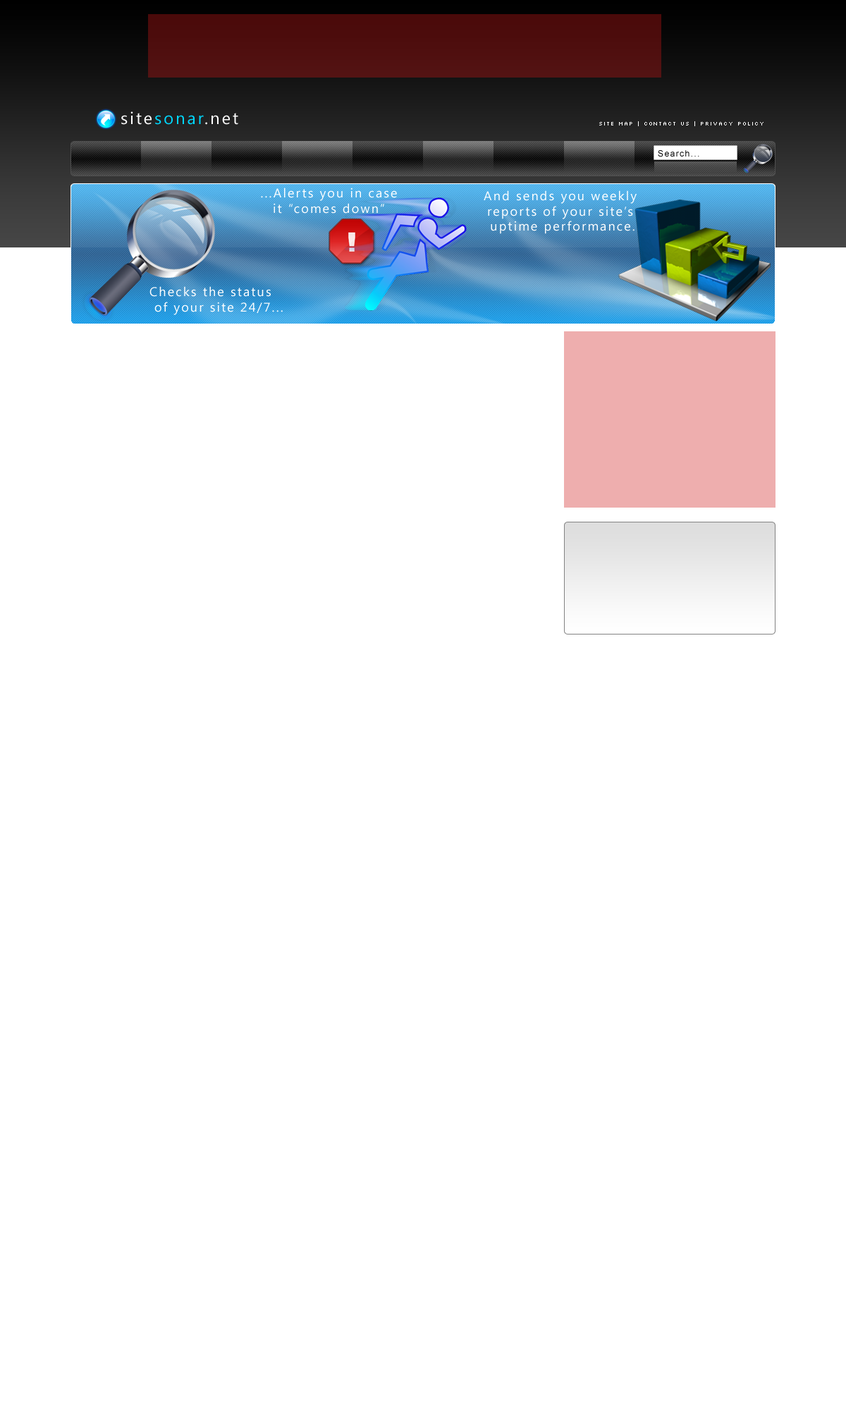
<style>
.page{position:relative;width:846px;height:1410px;background:#ffffff}
.page>*{position:absolute;margin:0}
.t1{font:16.9px "SegoeUI";letter-spacing:0.12em;color:#00d8ff}
.t2{font:16.9px "SegoeUI";letter-spacing:0.12em;color:#ffffff}
.t3{font:5.6px "Silkscreen";letter-spacing:0.12em;color:#ffffff}
.t4{font:8.5px "ArialMT";letter-spacing:0.12em;color:#000000}
.t5{font:12.7px "SegoeUI";letter-spacing:0.12em;color:#ffffff}
</style>
<div class="page">
<p class="t1" style="left:121px;top:111px;width:117px;height:14px"><span class="t2">site</span>sonar<span class="t2">.net</span></p>
<p class="t3" style="left:599px;top:121px;width:164px;height:5px">Site Map | Contact Us | Privacy Policy</p>
<p class="t4" style="left:658px;top:150px;width:41px;height:7px">Search...</p>
<p class="t5" style="left:261px;top:187px;width:136px;height:27px;text-align:center">...Alerts you in case <br>it “comes down”</p>
<p class="t5" style="left:484px;top:190px;width:153px;height:44px;text-align:center">And sends you weekly <br>reports of your site’s <br>uptime performance.</p>
<p class="t5" style="left:149px;top:286px;width:134px;height:29px">Checks the status<br> of your site 24/7...</p>
</div>
